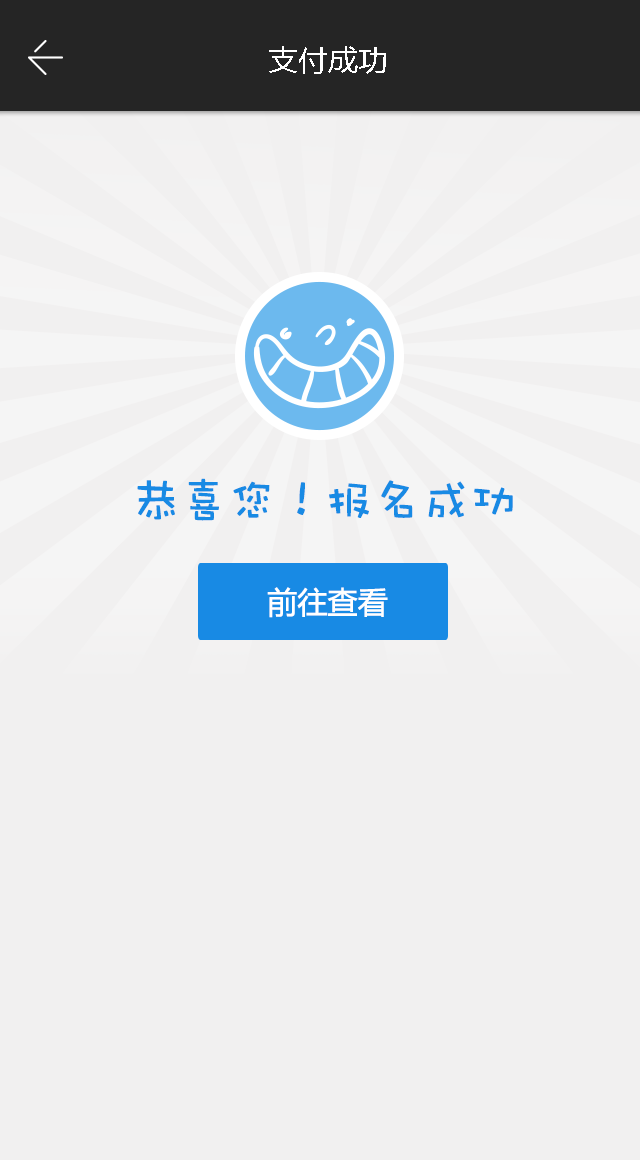
<style>
.page{position:relative;width:640px;height:1160px;background:#f1f0f0}
.page>*{position:absolute;margin:0}
.t1{font:30px "MicrosoftYaHei";color:#ffffff}
.t2{font:48px "DFWaWaSC-W5";letter-spacing:-0.02em;color:#188ae4;font-weight:bold}
.t3{font:30px "MicrosoftYaHei";letter-spacing:-0.02em;color:#ffffff;font-weight:bold}
</style>
<div class="page">
<p class="t1" style="left:269px;top:46px;width:117px;height:28px">支付成功</p>
<p class="t2" style="left:137px;top:478px;width:376px;height:43px">恭喜您！报名成功</p>
<p class="t3" style="left:267px;top:587px;width:121px;height:31px">前往查看</p>
</div>
